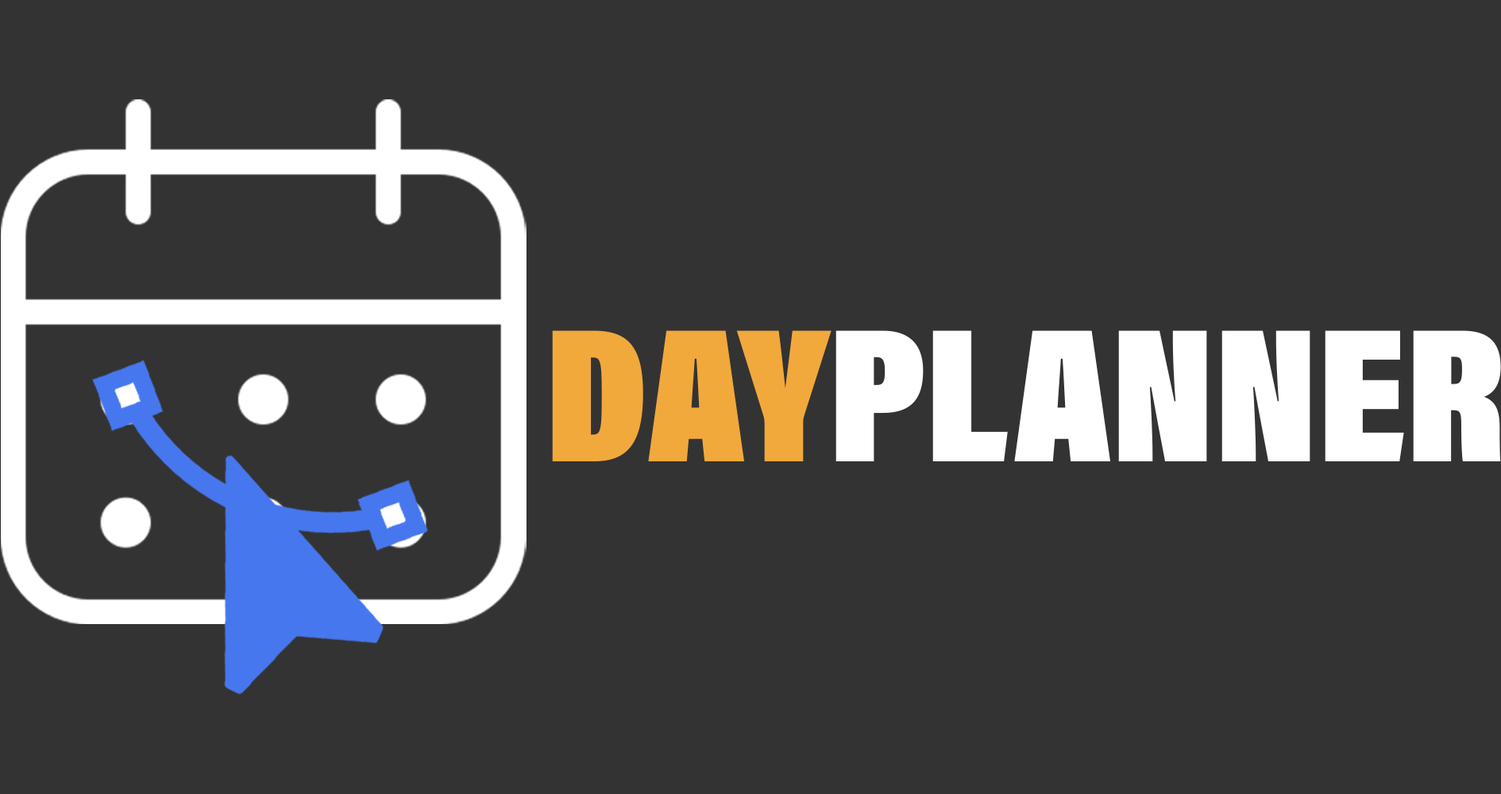
<style>
.page{position:relative;width:1501px;height:794px;background:#333333}
.page>*{position:absolute;margin:0}
.t1{font:193.8px "AcuminConcept-CondensedUltraBlack";color:#ffffff}
.t2{font:193.8px "AcuminConcept-CondensedUltraBlack";color:#f1a93b}
</style>
<div class="page">
<p class="t1" style="left:552px;top:330px;width:949px;height:131px"><span class="t2">DAY</span>PLANNER</p>
</div>
